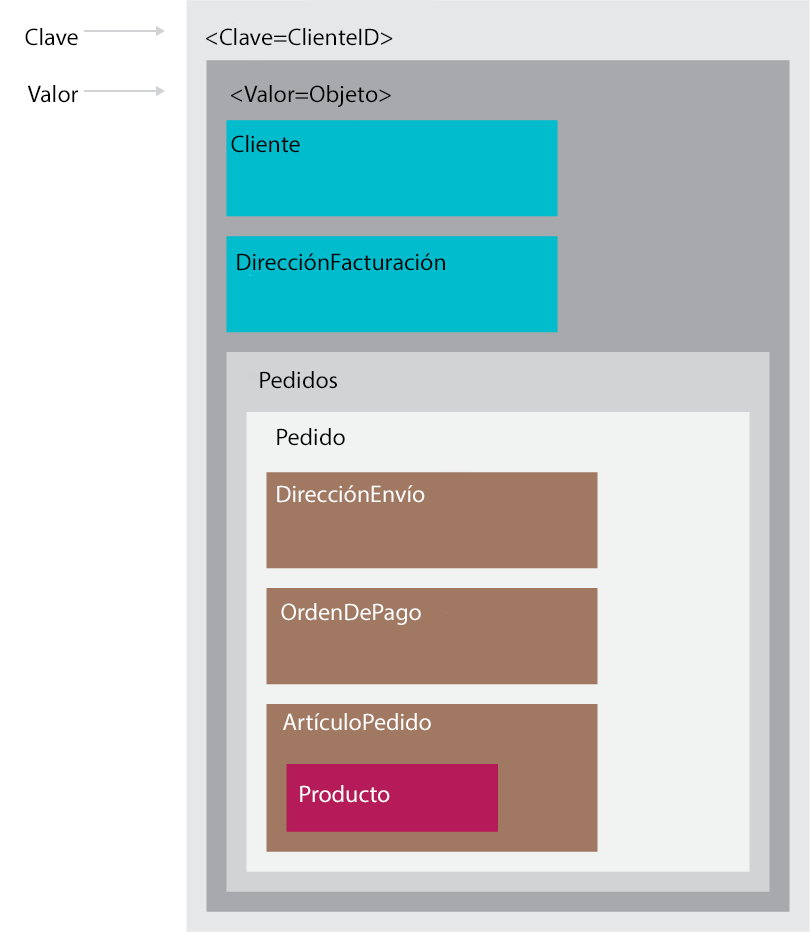
<style>
.page{position:relative;width:811px;height:932px;background:#ffffff}
.page>*{position:absolute;margin:0}
.t1{font:24px "MyriadPro-Regular";color:#000000}
.t2{font:24px "MyriadPro-Regular";color:#ffffff}
</style>
<div class="page">
<p class="t1" style="left:25px;top:28px;width:53px;height:18px">Clave</p>
<p class="t1" style="left:206px;top:28px;width:187px;height:18px">&lt;Clave=ClienteID&gt;</p>
<p class="t1" style="left:27px;top:85px;width:51px;height:18px">Valor</p>
<p class="t1" style="left:231px;top:85px;width:160px;height:22px">&lt;Valor=Objeto&gt;</p>
<p class="t1" style="left:231px;top:135px;width:69px;height:18px">Cliente</p>
<p class="t1" style="left:237px;top:253px;width:208px;height:18px">DirecciónFacturación</p>
<p class="t1" style="left:260px;top:371px;width:77px;height:18px">Pedidos</p>
<p class="t1" style="left:277px;top:428px;width:68px;height:18px">Pedido</p>
<p class="t2" style="left:277px;top:485px;width:148px;height:18px">DirecciónEnvío</p>
<p class="t2" style="left:281px;top:603px;width:140px;height:22px">OrdenDePago</p>
<p class="t2" style="left:283px;top:713px;width:148px;height:18px">ArtículoPedido</p>
<p class="t2" style="left:300px;top:785px;width:90px;height:18px">Producto</p>
</div>
